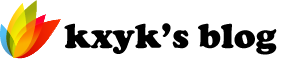
<style>
.page{position:relative;width:288px;height:59px;background:#ffffff}
.page>*{position:absolute;margin:0}
.t1{font:36px "CooperBlack";color:#000000}
</style>
<div class="page">
<p class="t1" style="left:64px;top:23px;width:213px;height:32px">kxyk’s blog</p>
</div>
